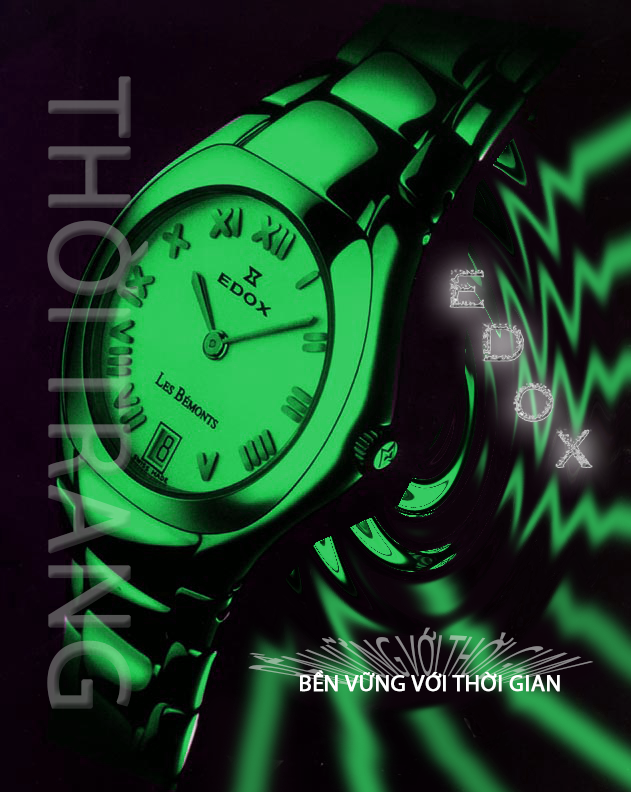
<style>
.page{position:relative;width:631px;height:792px}
.page>*{position:absolute;margin:0}
.t1{font:200px "MyriadPro-Regular";font-weight:bold}
.t2{font:40px "MyriadPro-Regular"}
.t3{font:40px "MyriadPro-Regular";color:#ffffff;font-weight:bold}
</style>
<div class="page">
<p class="t1" style="left:47px;top:76px;width:102px;height:633px;rotate:90deg">THỜI TRANG</p>
<p class="t2" style="left:248px;top:627px;width:346px;height:58px">BỀN VỮNG VỚI THỜI GIAN</p>
<p class="t3" style="left:300px;top:670px;width:260px;height:22px">BỀN VỮNG VỚI THỜI GIAN</p>
</div>
